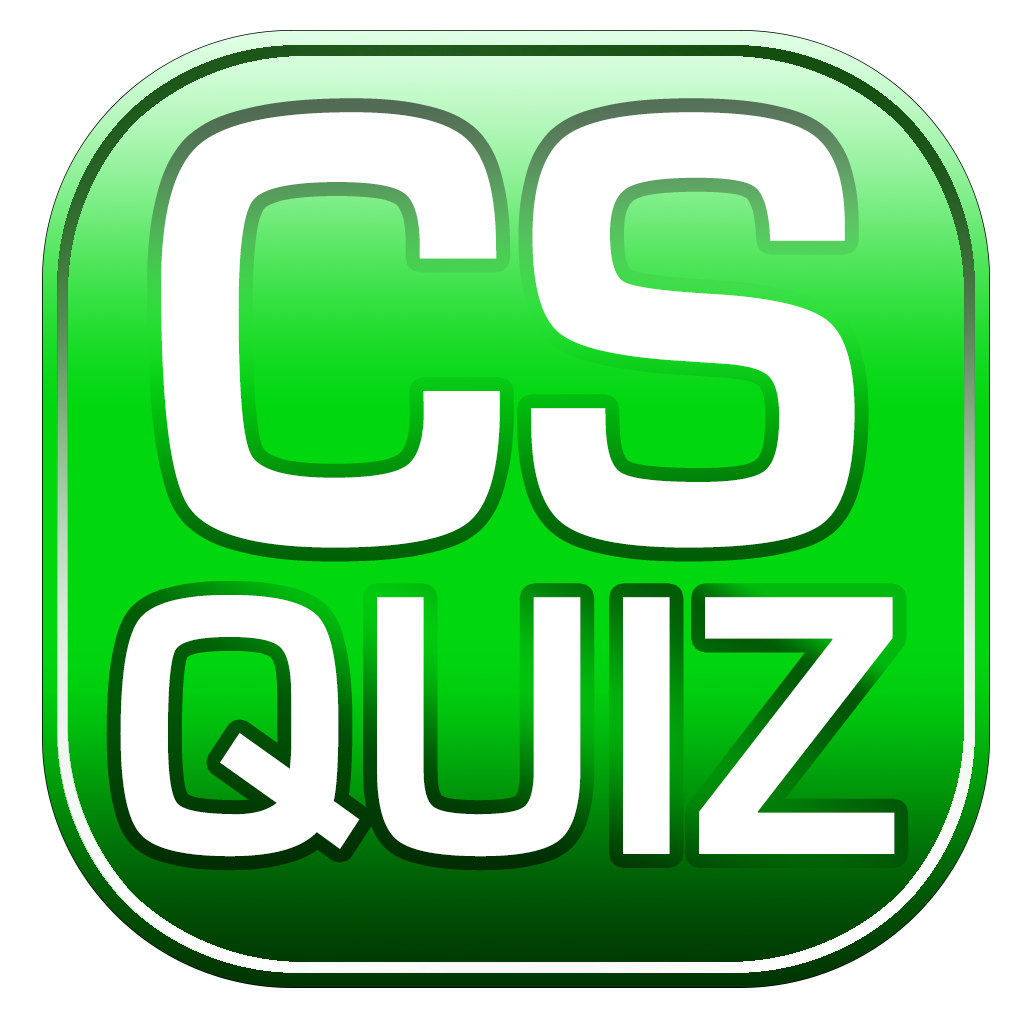
<style>
.page{position:relative;width:1024px;height:1024px;background:#ffffff}
.page>*{position:absolute;margin:0}
.t1{font:641.4px "EurostileBold";color:#ffffff;scale:0.94 1}
.t2{font:384.9px "EurostileBold";color:#ffffff;scale:0.95 1}
</style>
<div class="page">
<p class="t1" style="left:161px;top:112px;width:694px;height:436px">CS</p>
<p class="t2" style="left:120px;top:595px;width:775px;height:262px">QUIZ</p>
</div>
